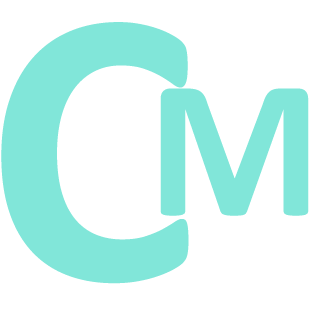
<style>
.page{position:relative;width:310px;height:310px;background:#ffffff}
.page>*{position:absolute;margin:0}
.t1{font:400px "Calibri-Bold";color:#81e6d9}
.t2{font:200px "Calibri-Bold";color:#81e6d9}
</style>
<div class="page">
<p class="t1" style="left:1px;top:22px;width:188px;height:262px">C</p>
<p class="t2" style="left:160px;top:88px;width:149px;height:128px">M</p>
</div>
